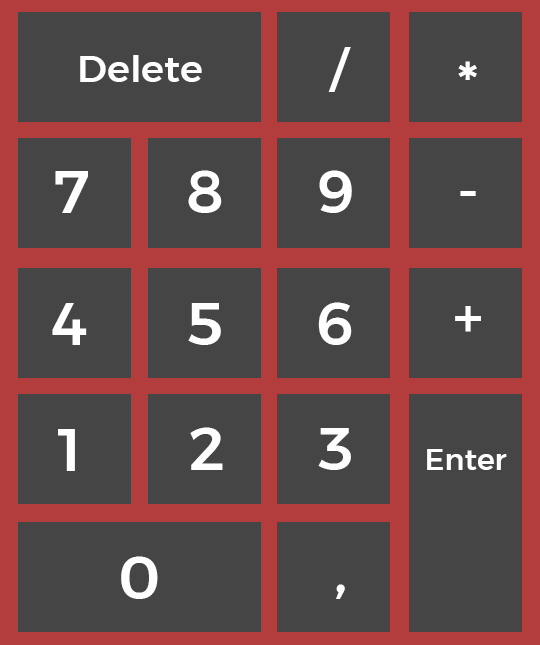
<style>
.page{position:relative;width:540px;height:645px;background:#454545}
.page>*{position:absolute;margin:0}
.t1{font:50px "Montserrat-Medium";color:#fffefe}
.t2{font:37.5px "Montserrat-Medium";color:#fffefe}
.t3{font:58.3px "Montserrat-Medium";color:#fffefe}
.t4{font:29.2px "Montserrat-Medium";color:#fffefe}
</style>
<div class="page">
<p class="t1" style="left:328px;top:47px;width:23px;height:45px">/</p>
<p class="t2" style="left:80px;top:55px;width:122px;height:27px">Delete</p>
<p class="t3" style="left:458px;top:61px;width:19px;height:19px">*</p>
<p class="t3" style="left:55px;top:171px;width:33px;height:42px">7</p>
<p class="t3" style="left:188px;top:170px;width:34px;height:43px">8</p>
<p class="t3" style="left:319px;top:170px;width:33px;height:43px">9</p>
<p class="t3" style="left:460px;top:191px;width:16px;height:5px">-</p>
<p class="t3" style="left:52px;top:303px;width:35px;height:42px">4</p>
<p class="t3" style="left:188px;top:303px;width:33px;height:42px">5</p>
<p class="t3" style="left:318px;top:302px;width:34px;height:43px">6</p>
<p class="t3" style="left:455px;top:306px;width:26px;height:26px">+</p>
<p class="t3" style="left:58px;top:429px;width:17px;height:42px">1</p>
<p class="t3" style="left:190px;top:427px;width:33px;height:43px">2</p>
<p class="t3" style="left:318px;top:428px;width:33px;height:42px">3</p>
<p class="t4" style="left:427px;top:449px;width:80px;height:21px">Enter</p>
<p class="t3" style="left:121px;top:556px;width:37px;height:43px">0</p>
<p class="t3" style="left:336px;top:584px;width:9px;height:15px">,</p>
</div>
